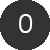
<style>
.page{position:relative;width:50px;height:50px;background:#333333}
.page>*{position:absolute;margin:0}
.t1{font:30px "Calibri-Light";color:#ffffff}
</style>
<div class="page">
<p class="t1" style="left:19px;top:14px;width:14px;height:19px">0</p>
</div>
